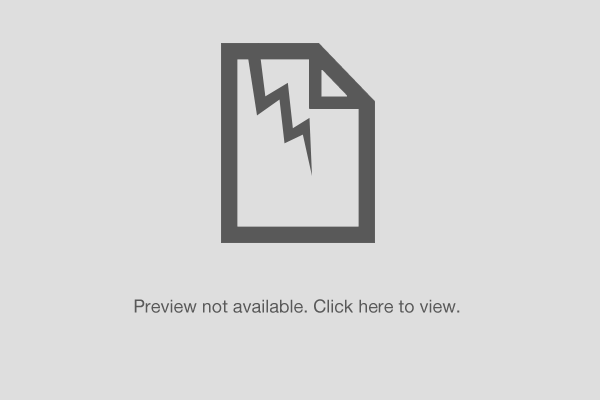
<style>
.page{position:relative;width:600px;height:400px;background:#dedede}
.page>*{position:absolute;margin:0}
.t1{font:18px "HelveticaNeue";color:#595959}
</style>
<div class="page">
<p class="t1" style="left:134px;top:299px;width:326px;height:14px">Preview not available. Click here to view.</p>
</div>
